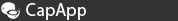
<style>
.page{position:relative;width:178px;height:21px;background:#333333}
.page>*{position:absolute;margin:0}
.t1{font:18px "MyriadPro-Regular";color:#ffffff}
</style>
<div class="page">
<p class="t1" style="left:26px;top:3px;width:60px;height:17px">CapApp</p>
</div>
